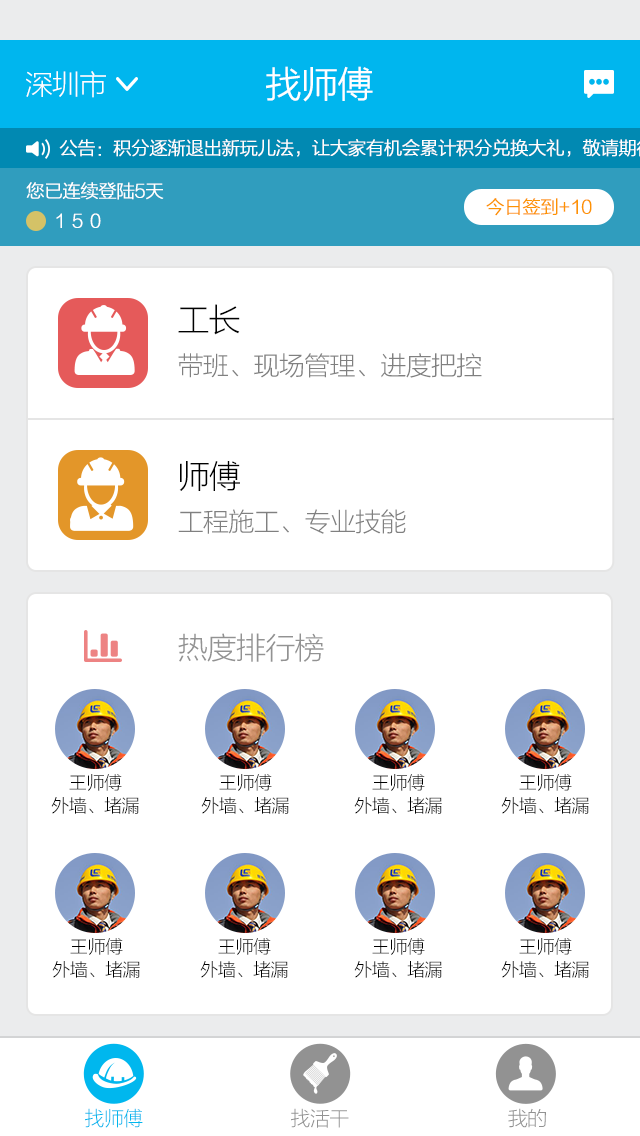
<style>
.page{position:relative;width:640px;height:1136px;background:#ffffff}
.page>*{position:absolute;margin:0}
.t1{font:28px "FZLTXHK--GBK1-0";letter-spacing:-0.025em;color:#ffffff}
.t2{font:36px "FZLTXHK--GBK1-0";letter-spacing:-0.025em;color:#ffffff;font-weight:bold}
.t3{font:18px "FZLTXHK--GBK1-0";letter-spacing:-0.025em;color:#ffffff;font-weight:bold}
.t4{font:18px "FZLTXHK--GBK1-0";letter-spacing:-0.025em;color:#fd9502;font-weight:bold}
.t5{font:32px "FZLTXHK--GBK1-0";letter-spacing:-0.025em;color:#000000}
.t6{font:26px "FZLTXHK--GBK1-0";letter-spacing:-0.025em;color:#808080}
.t7{font:30px "FZLTXHK--GBK1-0";letter-spacing:-0.025em;color:#929292}
.t8{font:18px/18px "FZLTXHK--GBK1-0";letter-spacing:-0.025em;color:#000000}
.t9{font:20px "FZLTXHK--GBK1-0";letter-spacing:-0.025em;color:#00b7ee}
.t10{font:20px "FZLTXHK--GBK1-0";letter-spacing:-0.025em;color:#929292}
</style>
<div class="page">
<p class="t1" style="left:26px;top:71px;width:80px;height:27px">深圳市</p>
<p class="t2" style="left:266px;top:66px;width:107px;height:36px">找师傅</p>
<p class="t3" style="left:26px;top:182px;width:138px;height:18px">您已连续登陆5天</p>
<p class="t4" style="left:486px;top:198px;width:106px;height:18px">今日签到+10</p>
<p class="t3" style="left:56px;top:213px;width:45px;height:15px">１５０</p>
<p class="t5" style="left:178px;top:304px;width:62px;height:31px">工长</p>
<p class="t6" style="left:178px;top:353px;width:304px;height:25px">带班、现场管理、进度把控</p>
<p class="t5" style="left:179px;top:461px;width:61px;height:30px">师傅</p>
<p class="t6" style="left:178px;top:509px;width:228px;height:25px">工程施工、专业技能</p>
<p class="t7" style="left:178px;top:633px;width:146px;height:29px">热度排行榜</p>
<p class="t8" style="left:51px;top:774px;width:88px;height:40px;text-align:center">王师傅<br>外墙、堵漏</p>
<p class="t8" style="left:201px;top:774px;width:88px;height:40px;text-align:center">王师傅<br>外墙、堵漏</p>
<p class="t8" style="left:354px;top:774px;width:88px;height:40px;text-align:center">王师傅<br>外墙、堵漏</p>
<p class="t8" style="left:501px;top:774px;width:88px;height:40px;text-align:center">王师傅<br>外墙、堵漏</p>
<p class="t8" style="left:52px;top:938px;width:88px;height:40px;text-align:center">王师傅<br>外墙、堵漏</p>
<p class="t8" style="left:200px;top:938px;width:88px;height:40px;text-align:center">王师傅<br>外墙、堵漏</p>
<p class="t8" style="left:354px;top:938px;width:88px;height:40px;text-align:center">王师傅<br>外墙、堵漏</p>
<p class="t8" style="left:501px;top:938px;width:88px;height:40px;text-align:center">王师傅<br>外墙、堵漏</p>
<p class="t9" style="left:85px;top:1108px;width:58px;height:20px">找师傅</p>
<p class="t10" style="left:291px;top:1108px;width:58px;height:20px">找活干</p>
<p class="t10" style="left:508px;top:1108px;width:38px;height:20px">我的</p>
</div>
